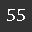
<style>
.page{position:relative;width:32px;height:32px;background:#333333}
.page>*{position:absolute;margin:0}
.t1{font:17.8px "MyriadPro-Regular";color:#ffffff;scale:1.12 1}
</style>
<div class="page">
<p class="t1" style="left:7px;top:9px;width:18px;height:12px">55</p>
</div>
